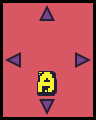
<style>
.page{position:relative;width:96px;height:120px;background:#d95763}
.page>*{position:absolute;margin:0}
.t1{font:16px "Mitochondria";color:#fbf236}
</style>
<div class="page">
<p class="t1" style="left:38px;top:72px;width:16px;height:20px">A</p>
</div>
